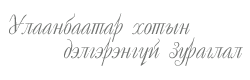
<style>
.page{position:relative;width:250px;height:80px;background:#ffffff}
.page>*{position:absolute;margin:0}
.t1{font:28px/24px "MonFnt05";color:#707270}
</style>
<div class="page">
<p class="t1" style="left:9px;top:13px;width:234px;height:53px;text-align:center">Óëààíáààòàð õîòûí<br>   äýëãýðýíã¿é çóðàãëàë</p>
</div>
